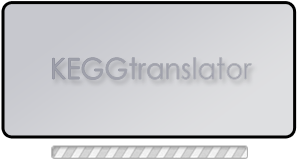
<style>
.page{position:relative;width:300px;height:168px}
.page>*{position:absolute;margin:0}
.t1{font:28.8px "CenturyGothic";color:#8f919d;scale:0.95 1}
</style>
<div class="page">
<p class="t1" style="left:52px;top:57px;width:200px;height:23px">KEGGtranslator</p>
</div>
